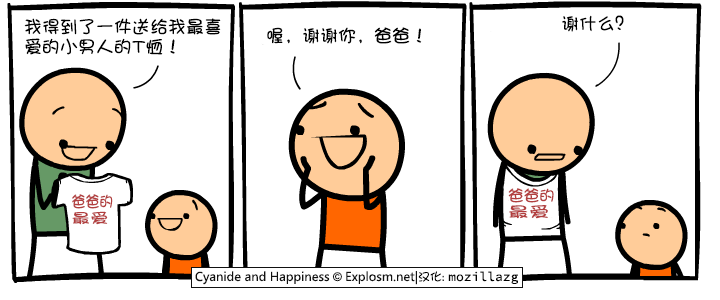
<style>
.page{position:relative;width:720px;height:300px;background:#ffffff}
.page>*{position:absolute;margin:0}
.t1{font:18px "DFPShaoNvW5";color:#000000}
.t2{font:18px/20px "DFPShaoNvW5";color:#000000}
.t3{font:15.7px/16px "DFShaoNvW5";color:#b23f3f;scale:0.89 1}
.t4{font:14px/16px "DFShaoNvW5";color:#b23f3f;scale:1.32 1}
.t5{font:15.7px/16px "DFShaoNvW5";color:#b23f3f}
.t6{font:14.8px/16px "DFShaoNvW5";color:#b23f3f;scale:1.4 1}
</style>
<div class="page">
<p class="t1" style="left:562px;top:15px;width:62px;height:17px">谢什么？</p>
<p class="t2" style="left:24px;top:18px;width:197px;height:37px">我得到了一件送给我最喜<br>爱的小男人的T恤！</p>
<p class="t1" style="left:267px;top:27px;width:155px;height:17px">喔，谢谢你，爸爸！</p>
<p class="t3" style="left:72px;top:194px;width:41px;height:31px">爸爸的<br><span class="t4">最爱</span></p>
<p class="t5" style="left:508px;top:188px;width:46px;height:31px">爸爸的<br><span class="t6">最爱</span></p>
</div>
